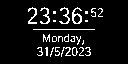
<style>
.page{position:relative;width:128px;height:64px;background:#000000}
.page>*{position:absolute;margin:0}
.t1{font:22px "GothicA1-Regular";color:#ffffff}
.t2{font:12px "GothicA1-Regular";color:#ffffff}
.t3{font:11px "GothicA1-Regular";color:#ffffff}
.t4{font:14px "GothicA1-Regular";color:#ffffff}
</style>
<div class="page">
<p class="t1" style="left:27px;top:7px;width:62px;height:18px">23:36:</p>
<p class="t2" style="left:90px;top:8px;width:13px;height:10px">52</p>
<p class="t2" style="left:37px;top:33px;width:54px;height:24px;text-align:center"><span class="t3">Monday</span><span class="t4">,<br></span>31/5/2023</p>
</div>
